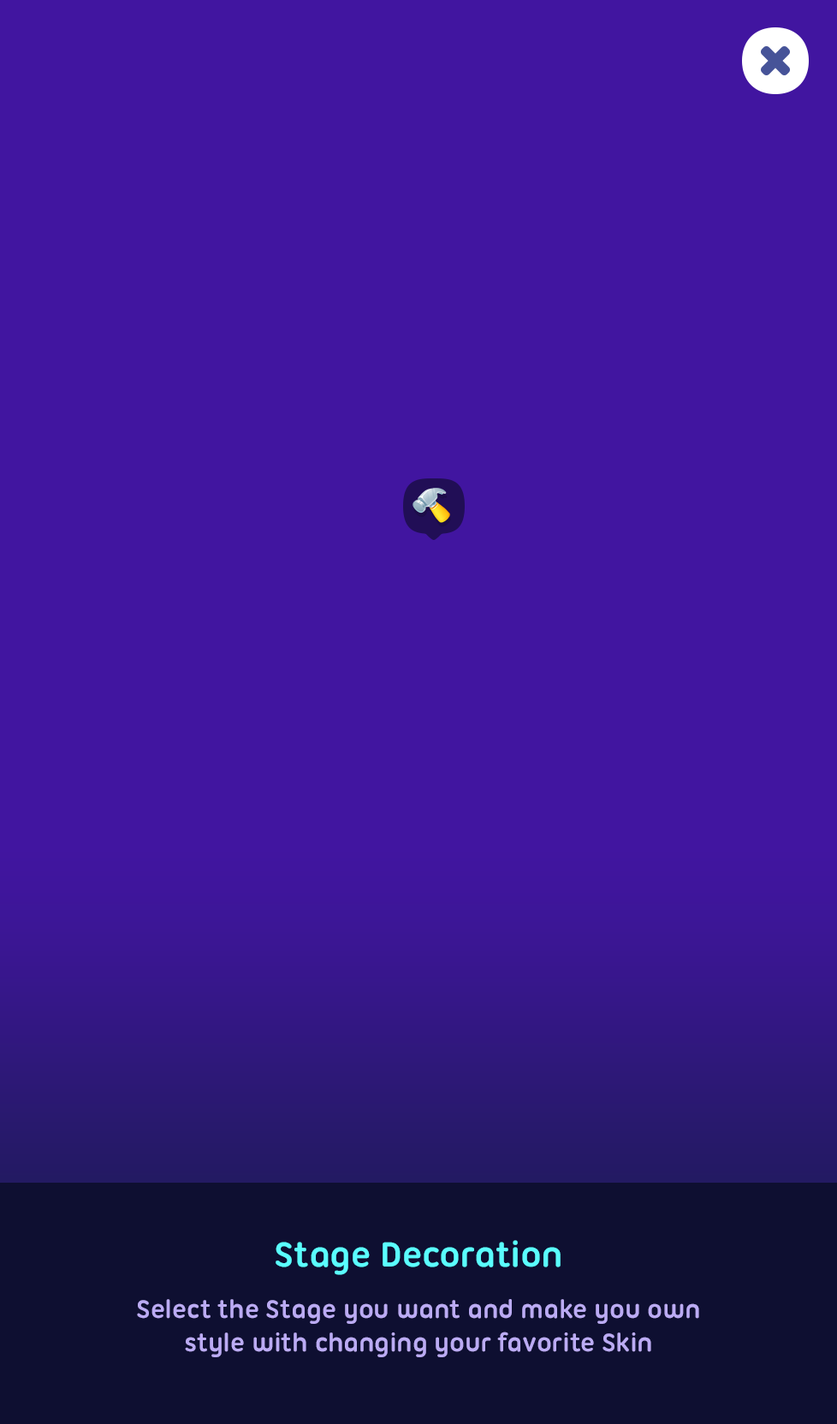
<style>
.page{position:relative;width:837px;height:1424px;background:#4115a0}
.page>*{position:absolute;margin:0}
.t1{font:37.7px "UbuntuTitling-Bold";letter-spacing:-0.01em;color:#5afdff}
.t2{font:27.4px "UbuntuTitling-Bold";letter-spacing:-0.01em;color:#bbabf4}
</style>
<div class="page">
<p class="t1" style="left:276px;top:1240px;width:285px;height:35px">Stage Decoration</p>
<p class="t2" style="left:137px;top:1299px;width:562px;height:59px;text-align:center">Select the Stage you want and make you own<br>style with changing your favorite Skin</p>
</div>
